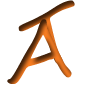
<style>
.page{position:relative;width:100px;height:100px;background:#ffffff}
.page>*{position:absolute;margin:0}
.t1{font:80px "SegoeScript"}
</style>
<div class="page">
<p class="t1" style="left:18px;top:0px;width:57px;height:65px;rotate:-20deg">T</p>
<p class="t1" style="left:7px;top:19px;width:65px;height:65px;rotate:-6deg">A</p>
</div>
